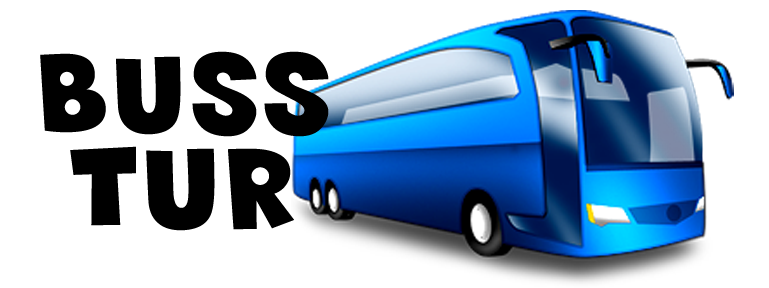
<style>
.page{position:relative;width:769px;height:288px;background:#ffffff}
.page>*{position:absolute;margin:0}
.t1{font:116px "SneakerheadBTN";color:#000000;font-weight:bold}
.t2{font:122.7px "SneakerheadBTN";color:#000000;font-weight:bold}
</style>
<div class="page">
<p class="t1" style="left:40px;top:51px;width:289px;height:86px">BUSS</p>
<p class="t2" style="left:70px;top:146px;width:224px;height:85px">TUR</p>
</div>
